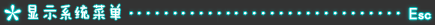
<style>
.page{position:relative;width:435px;height:25px;background:#333333}
.page>*{position:absolute;margin:0}
.t1{font:18px "¢è?";color:#ffffff}
</style>
<div class="page">
<p class="t1" style="left:28px;top:4px;width:93px;height:16px">显示系统菜单</p>
</div>
